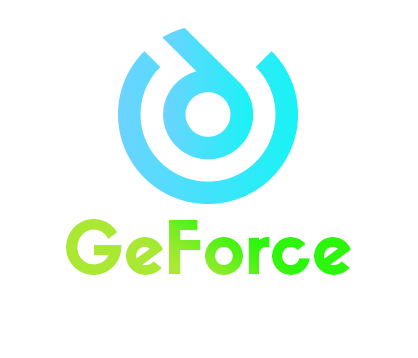
<style>
.page{position:relative;width:418px;height:358px;background:#ffffff}
.page>*{position:absolute;margin:0}
.t1{font:72px "Sifonn-Pro"}
</style>
<div class="page">
<p class="t1" style="left:66px;top:219px;width:285px;height:56px">GeForce</p>
</div>
